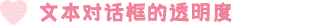
<style>
.page{position:relative;width:333px;height:25px;background:#ffffff}
.page>*{position:absolute;margin:0}
.t1{font:21.2px "shetumodengxiaofangti";color:#ef8299;font-weight:bold}
</style>
<div class="page">
<p class="t1" style="left:40px;top:2px;width:192px;height:20px">文本对话框的透明度</p>
</div>
